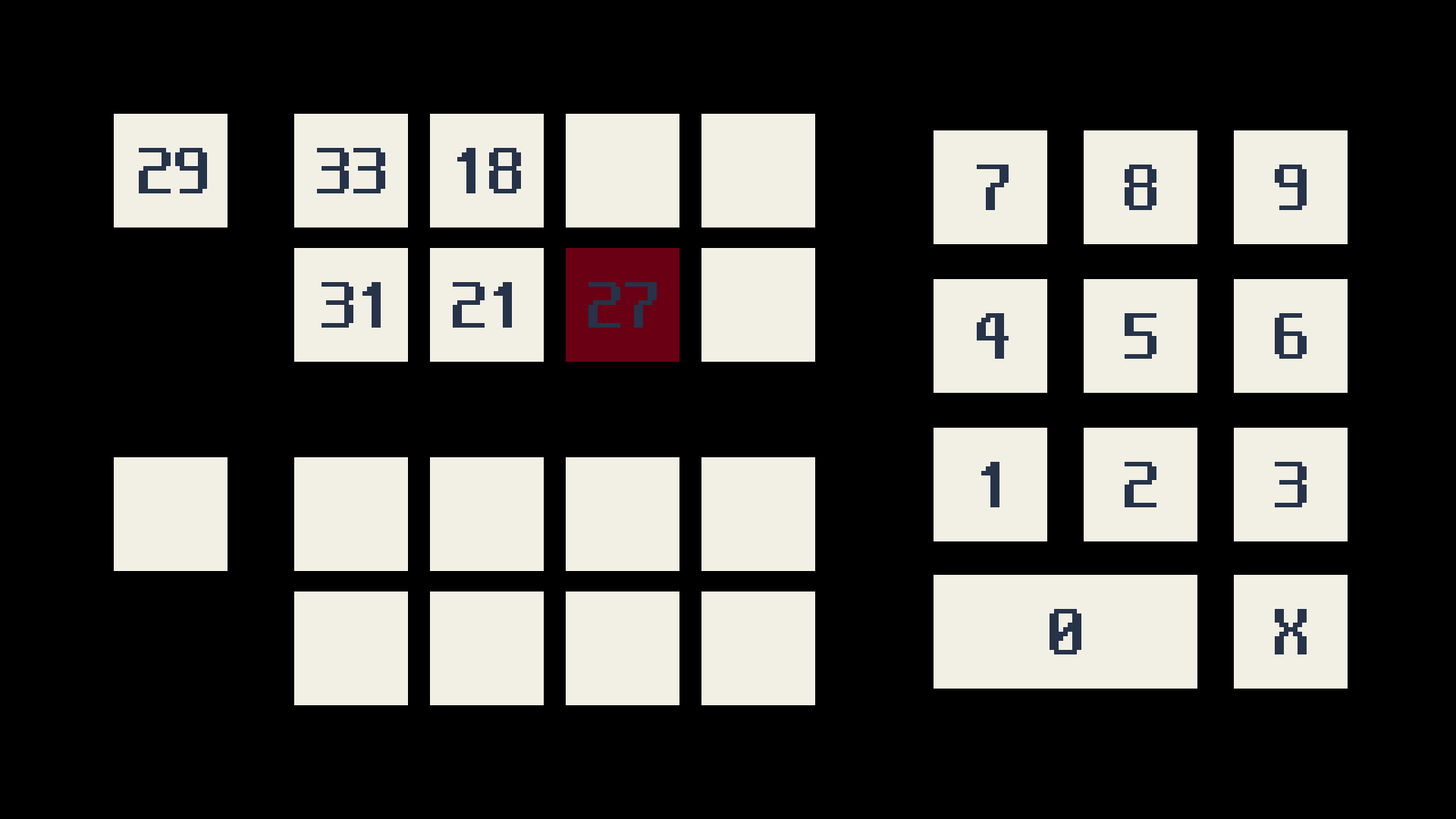
<style>
.page{position:relative;width:1456px;height:819px;background:#000000}
.page>*{position:absolute;margin:0}
.t1{font:72.8px "NeoDunggeunmoCode-Regular";color:#263349}
</style>
<div class="page">
<p class="t1" style="left:139px;top:148px;width:68px;height:45px">29</p>
<p class="t1" style="left:317px;top:148px;width:68px;height:45px">33</p>
<p class="t1" style="left:457px;top:148px;width:64px;height:45px">18</p>
<p class="t1" style="left:977px;top:165px;width:32px;height:45px">7</p>
<p class="t1" style="left:1125px;top:165px;width:31px;height:45px">8</p>
<p class="t1" style="left:1275px;top:165px;width:32px;height:45px">9</p>
<p class="t1" style="left:322px;top:282px;width:59px;height:46px">31</p>
<p class="t1" style="left:453px;top:282px;width:59px;height:46px">21</p>
<p class="t1" style="left:588px;top:282px;width:69px;height:46px">27</p>
<p class="t1" style="left:977px;top:313px;width:32px;height:46px">4</p>
<p class="t1" style="left:1125px;top:313px;width:31px;height:46px">5</p>
<p class="t1" style="left:1275px;top:313px;width:32px;height:46px">6</p>
<p class="t1" style="left:981px;top:462px;width:18px;height:45px">1</p>
<p class="t1" style="left:1125px;top:462px;width:31px;height:45px">2</p>
<p class="t1" style="left:1275px;top:462px;width:32px;height:45px">3</p>
<p class="t1" style="left:1050px;top:609px;width:31px;height:45px">0</p>
<p class="t1" style="left:1275px;top:609px;width:32px;height:45px">X</p>
</div>
